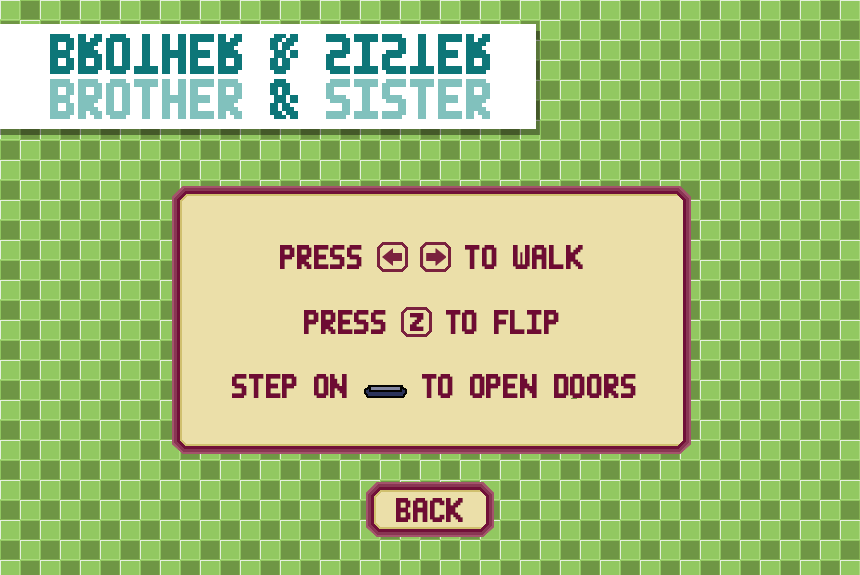
<style>
.page{position:relative;width:860px;height:575px;background:#92c861}
.page>*{position:absolute;margin:0}
.t1{font:80px "MiniPixel-7";color:#0d7678}
.t2{font:80px "MiniPixel-7";color:#81c1bd}
.t3{font:48px "MiniPixel-7";color:#6e0c33}
.t4{font:45px "MiniPixel-7";color:#6e0c33}
</style>
<div class="page">
<p class="t1" style="left:50px;top:34px;width:440px;height:40px">BROTHER &amp; SISTER</p>
<p class="t2" style="left:50px;top:79px;width:440px;height:40px">BROTHER <span class="t1">&amp;</span> SISTER</p>
<p class="t3" style="left:280px;top:245px;width:303px;height:24px">PRESS       TO WALK</p>
<p class="t3" style="left:304px;top:310px;width:255px;height:24px">PRESS    TO FLIP</p>
<p class="t4" style="left:410px;top:313px;width:14px;height:18px">z</p>
<p class="t3" style="left:232px;top:374px;width:404px;height:24px">STEP ON     TO OPEN DOORS</p>
<p class="t3" style="left:396px;top:498px;width:67px;height:24px">BACK</p>
</div>
